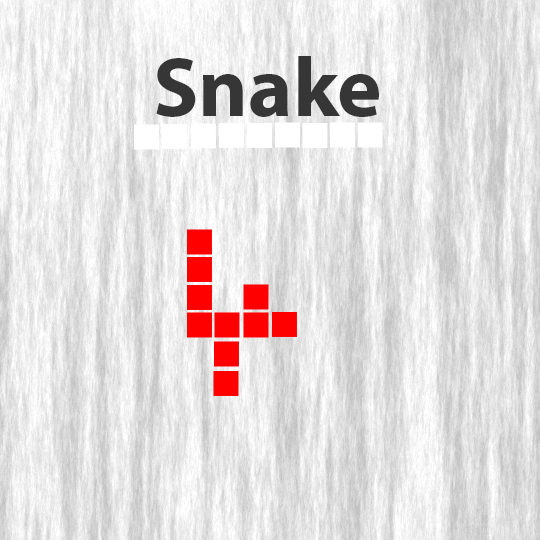
<style>
.page{position:relative;width:540px;height:540px}
.page>*{position:absolute;margin:0}
.t1{font:84.7px "MyriadPro-Bold";color:#363636}
</style>
<div class="page">
<p class="t1" style="left:156px;top:56px;width:223px;height:61px">Snake</p>
</div>
